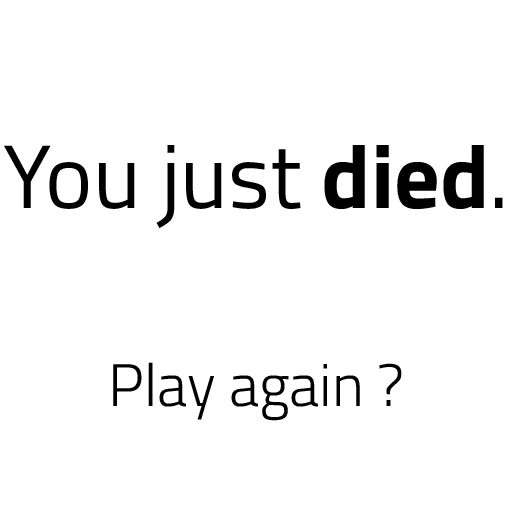
<style>
.page{position:relative;width:512px;height:512px;background:#ffffff}
.page>*{position:absolute;margin:0}
.t1{font:90px "TitilliumWeb-Regular";color:#000000}
.t2{font:90px "TitilliumWeb-Bold";color:#000000}
.t3{font:60px "TitilliumWeb-Light";color:#000000}
</style>
<div class="page">
<p class="t1" style="left:4px;top:145px;width:499px;height:83px">You just <span class="t2">died</span>.</p>
<p class="t3" style="left:113px;top:362px;width:289px;height:59px">Play again ?</p>
</div>
